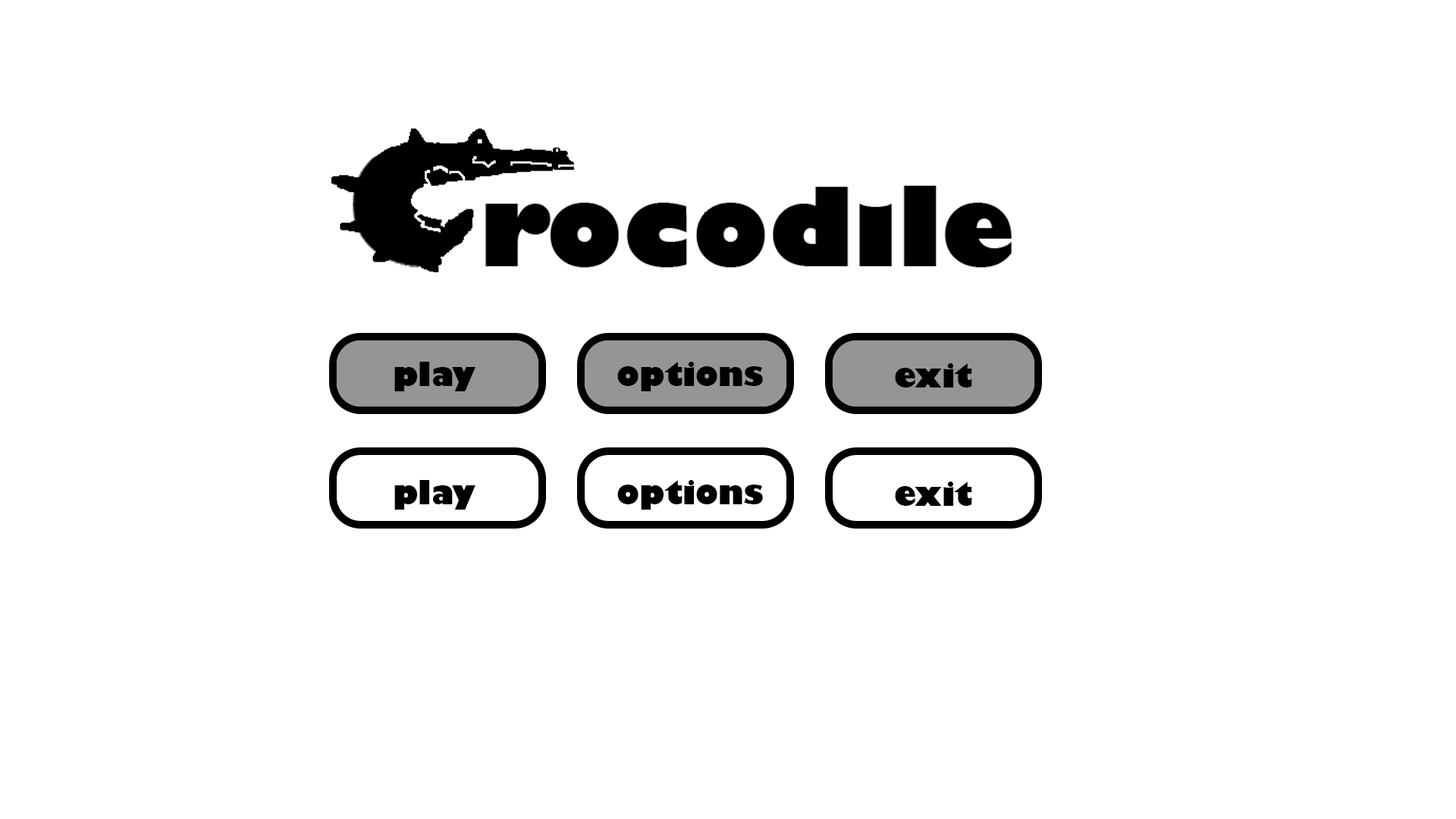
<style>
.page{position:relative;width:1456px;height:819px;background:#ffffff}
.page>*{position:absolute;margin:0}
.t1{font:31.6px "GillSans-UltraBold";color:#000000}
</style>
<div class="page">
<p class="t1" style="left:394px;top:362px;width:81px;height:29px">play</p>
<p class="t1" style="left:617px;top:362px;width:146px;height:29px">options</p>
<p class="t1" style="left:895px;top:363px;width:77px;height:25px">exit</p>
<p class="t1" style="left:394px;top:480px;width:81px;height:30px">play</p>
<p class="t1" style="left:617px;top:480px;width:146px;height:30px">options</p>
<p class="t1" style="left:895px;top:482px;width:77px;height:24px">exit</p>
</div>
